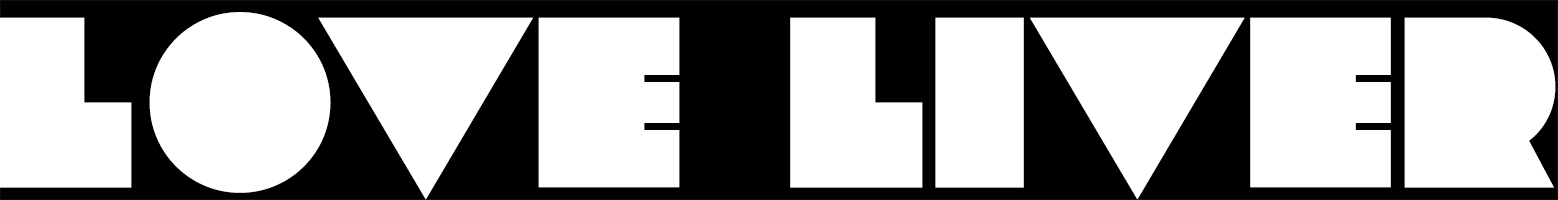
<style>
.page{position:relative;width:1558px;height:200px;background:#ffffff}
.page>*{position:absolute;margin:0}
.t1{font:241.9px "Lot";color:#ffffff}
</style>
<div class="page">
<p class="t1" style="left:0px;top:12px;width:1556px;height:188px">LOVE LIVER</p>
</div>
